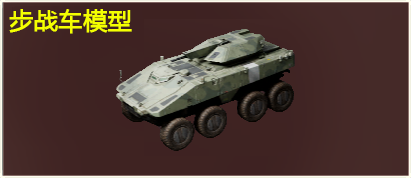
<style>
.page{position:relative;width:411px;height:178px}
.page>*{position:absolute;margin:0}
.t1{font:24px "MicrosoftYaHeiUI";color:#f4ff00;font-weight:bold}
</style>
<div class="page">
<p class="t1" style="left:9px;top:9px;width:123px;height:25px">步战车模型</p>
</div>
